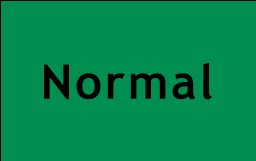
<style>
.page{position:relative;width:256px;height:161px;background:#018f51}
.page>*{position:absolute;margin:0}
.t1{font:48px "TrebuchetMS-Bold";letter-spacing:0.05em;color:#000000}
</style>
<div class="page">
<p class="t1" style="left:44px;top:62px;width:168px;height:38px">Normal</p>
</div>
